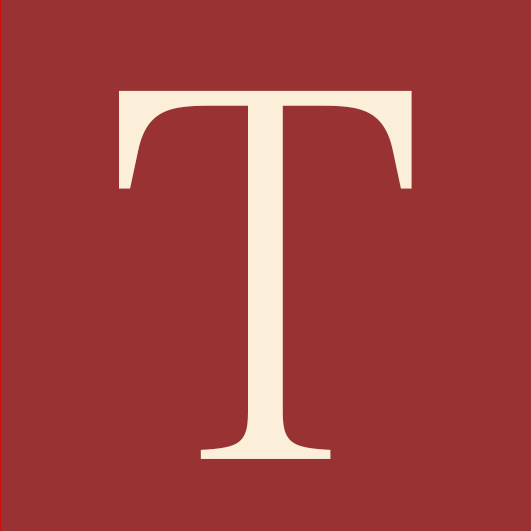
<style>
.page{position:relative;width:531px;height:531px;background:#993333}
.page>*{position:absolute;margin:0}
.t1{font:505.3px "IvyJournal-Light";letter-spacing:0.02em;color:#fbefd9}
</style>
<div class="page">
<p class="t1" style="left:119px;top:90px;width:293px;height:369px">T</p>
</div>
